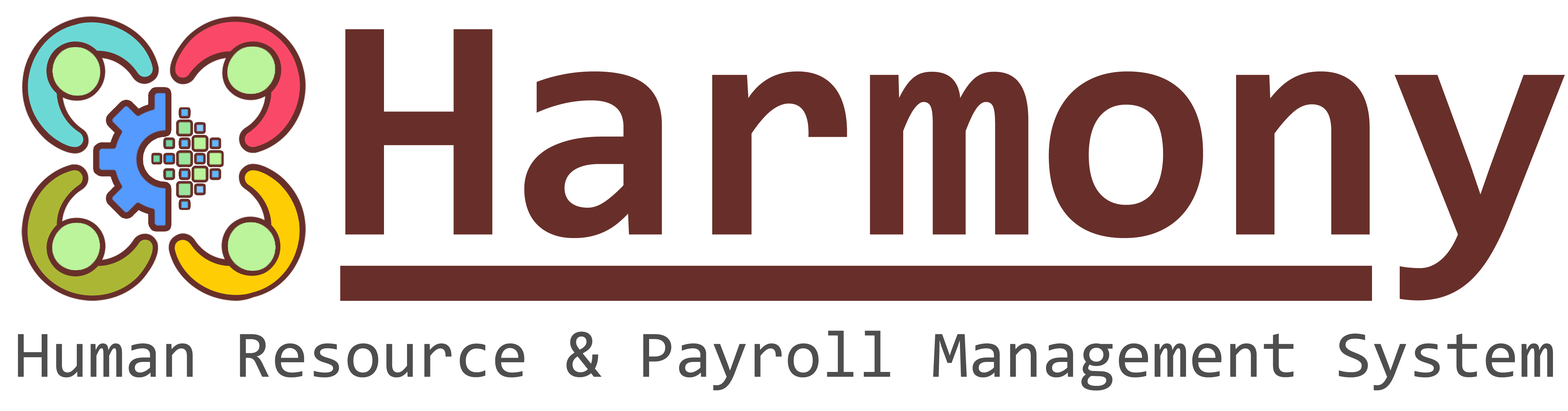
<style>
.page{position:relative;width:1568px;height:411px;background:#ffffff}
.page>*{position:absolute;margin:0}
.t1{font:321.5px "Consolas-Bold";color:#682f2a}
.t2{font:66.7px "Consolas";color:#4e4e4e}
</style>
<div class="page">
<p class="t1" style="left:345px;top:29px;width:1220px;height:272px">Harmony</p>
<p class="t2" style="left:18px;top:331px;width:1535px;height:60px">Human Resource &amp; Payroll Management System</p>
</div>
